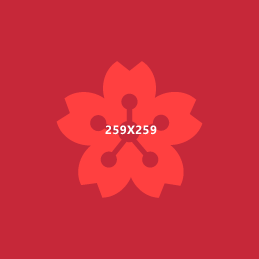
<style>
.page{position:relative;width:259px;height:259px;background:#c62839}
.page>*{position:absolute;margin:0}
.t1{font:12px "SegoeWP-Bold";letter-spacing:0.025em;color:#ffffff;text-transform:uppercase}
</style>
<div class="page">
<p class="t1" style="left:105px;top:125px;width:52px;height:10px">259x259</p>
</div>
